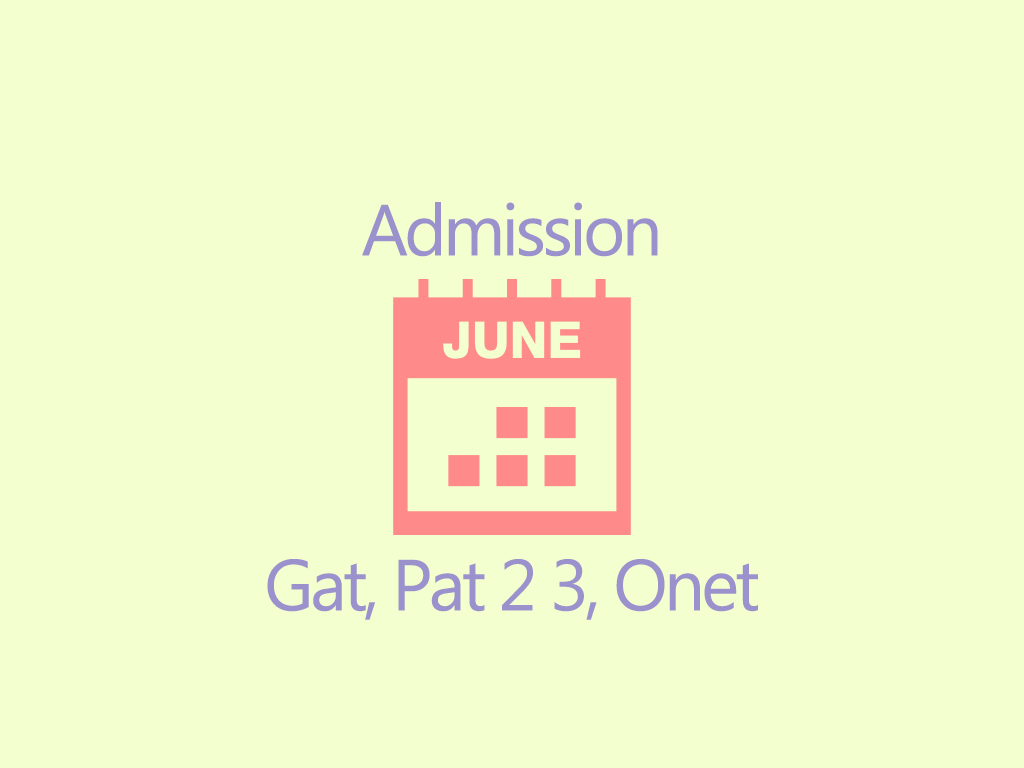
<style>
.page{position:relative;width:1024px;height:768px;background:#f3ffce}
.page>*{position:absolute;margin:0}
.t1{font:72px "MicrosoftTaiLe";letter-spacing:-0.05em;color:#9b92cd}
</style>
<div class="page">
<p class="t1" style="left:362px;top:202px;width:296px;height:55px">Admission</p>
<p class="t1" style="left:267px;top:559px;width:491px;height:61px">Gat, Pat 2 3, Onet</p>
</div>
